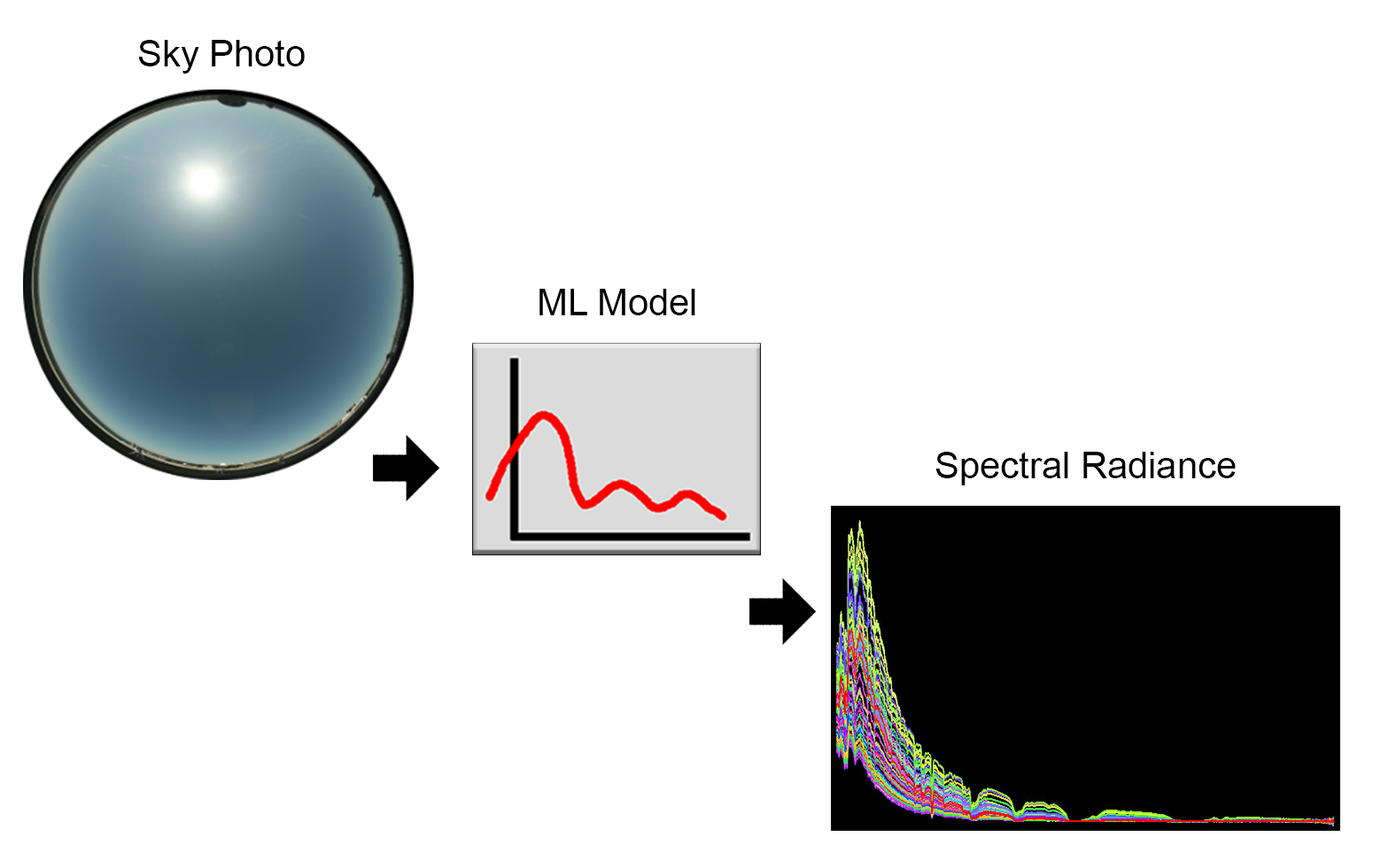
<style>
.page{position:relative;width:1373px;height:868px;background:#ffffff}
.page>*{position:absolute;margin:0}
.t1{font:36.9px "ArialMT";color:#000000}
</style>
<div class="page">
<p class="t1" style="left:138px;top:40px;width:167px;height:34px">Sky Photo</p>
<p class="t1" style="left:540px;top:289px;width:156px;height:26px">ML Model</p>
<p class="t1" style="left:936px;top:452px;width:300px;height:34px">Spectral Radiance</p>
</div>
